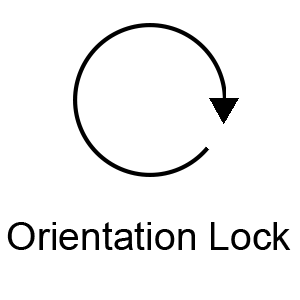
<style>
.page{position:relative;width:300px;height:300px;background:#ffffff}
.page>*{position:absolute;margin:0}
.t1{font:39.1px "ArialMT";color:#000000}
</style>
<div class="page">
<p class="t1" style="left:7px;top:222px;width:284px;height:28px">Orientation Lock</p>
</div>
